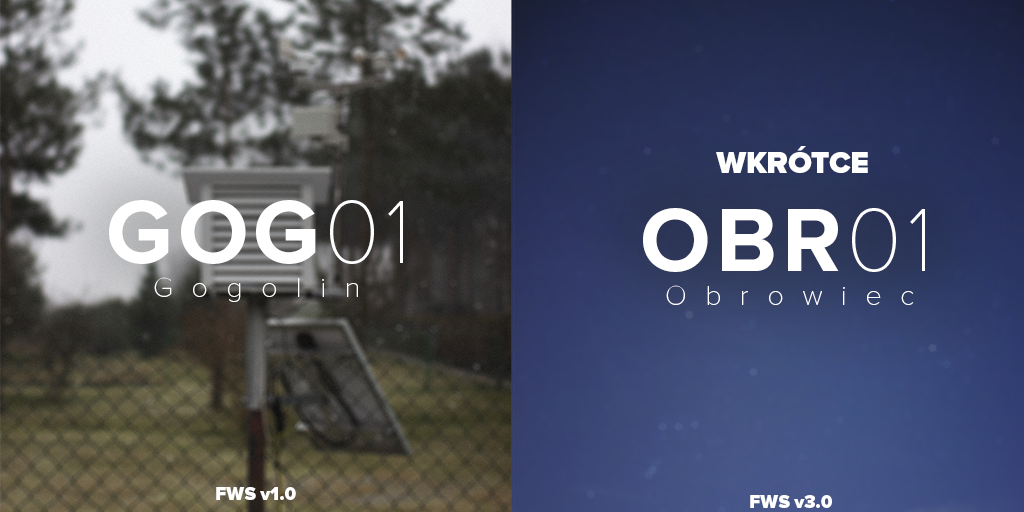
<style>
.page{position:relative;width:1024px;height:512px}
.page>*{position:absolute;margin:0}
.t1{font:31.1px "ProximaNova-Black";color:#ffffff}
.t2{font:92.6px "ProximaNova-Bold";letter-spacing:0.05em;color:#ffffff}
.t3{font:92.6px "ProximaNovaT-Thin";letter-spacing:0.05em;color:#ffffff}
.t4{font:28.6px "ProximaNovaT-Thin";letter-spacing:0.65em;color:#ffffff}
.t5{font:18.6px "ProximaNova-Black";color:#ffffff}
</style>
<div class="page">
<p class="t1" style="left:716px;top:146px;width:152px;height:27px">WKRÓTCE</p>
<p class="t2" style="left:109px;top:200px;width:294px;height:64px">GOG<span class="t3">01</span></p>
<p class="t2" style="left:643px;top:208px;width:282px;height:64px">OBR<span class="t3">01</span></p>
<p class="t4" style="left:154px;top:277px;width:204px;height:25px">Gogolin</p>
<p class="t4" style="left:666px;top:285px;width:248px;height:20px">Obrowiec</p>
<p class="t5" style="left:216px;top:487px;width:80px;height:13px">FWS v1.0</p>
<p class="t5" style="left:750px;top:495px;width:82px;height:13px">FWS v3.0</p>
</div>
